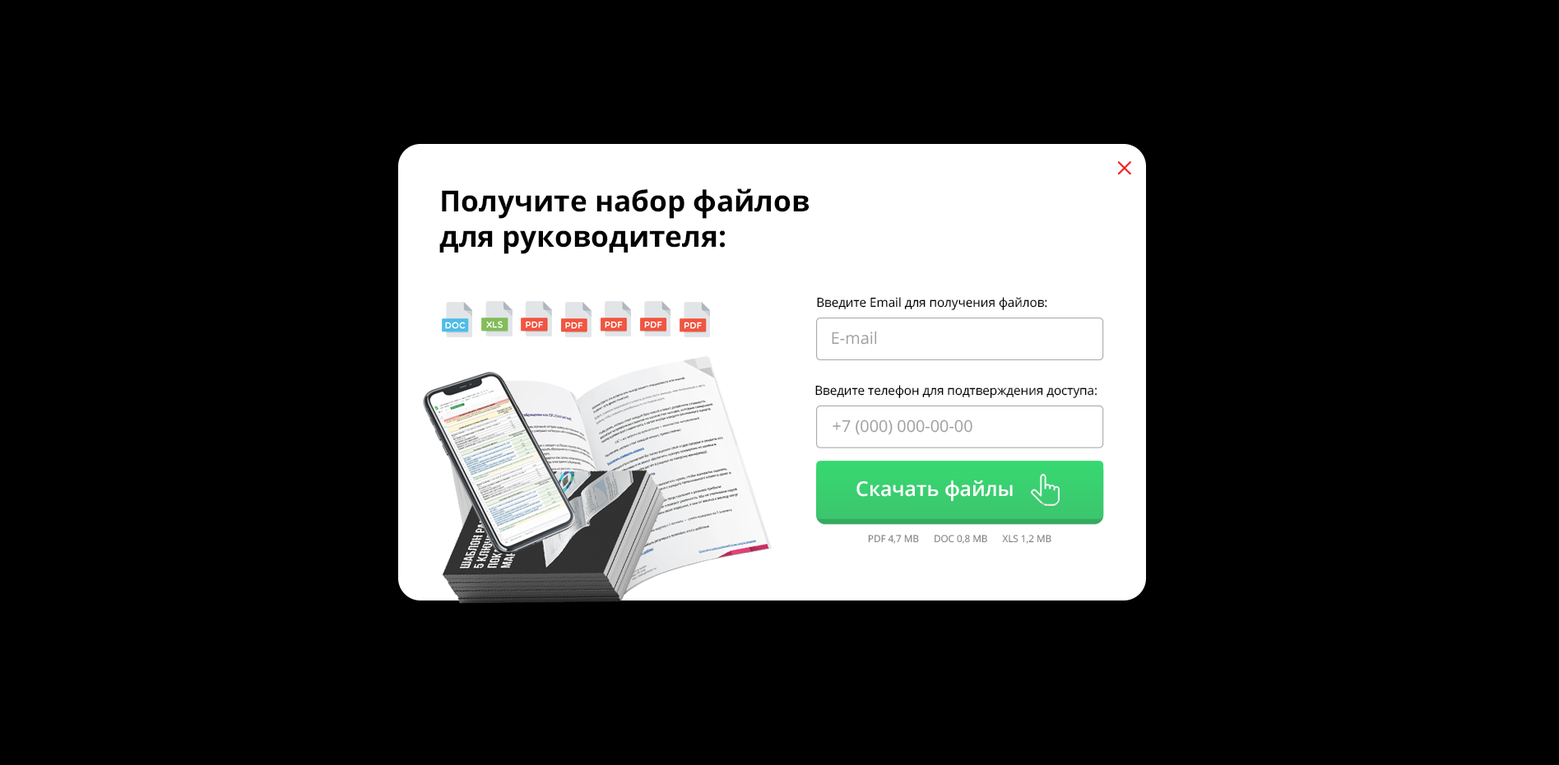
<style>
.page{position:relative;width:1559px;height:765px;background:#000000}
.page>*{position:absolute;margin:0}
.t1{font:28.9px "OpenSans-Bold";color:#000000}
.t2{font:12.5px "OpenSans";color:#000000}
.t3{font:16.3px "OpenSans";color:#a0a0a0}
.t4{font:20.3px "OpenSans-Semibold";color:#ffffff}
.t5{font:9.6px "OpenSans";color:#808080}
</style>
<div class="page">
<p class="t1" style="left:439px;top:188px;width:370px;height:66px">Получите набор файлов<br>для руководителя:</p>
<p class="t2" style="left:817px;top:297px;width:230px;height:13px">Введите Email для получения файлов:</p>
<p class="t3" style="left:832px;top:331px;width:45px;height:14px">E-mail</p>
<p class="t2" style="left:815px;top:385px;width:282px;height:13px">Введите телефон для подтверждения доступа:</p>
<p class="t3" style="left:832px;top:420px;width:140px;height:15px">+7 (000) 000-00-00</p>
<p class="t4" style="left:856px;top:480px;width:157px;height:21px">Скачать файлы</p>
<p class="t5" style="left:868px;top:535px;width:183px;height:9px">PDF 4,7 MB      DOC 0,8 MB      XLS 1,2 MB</p>
</div>
